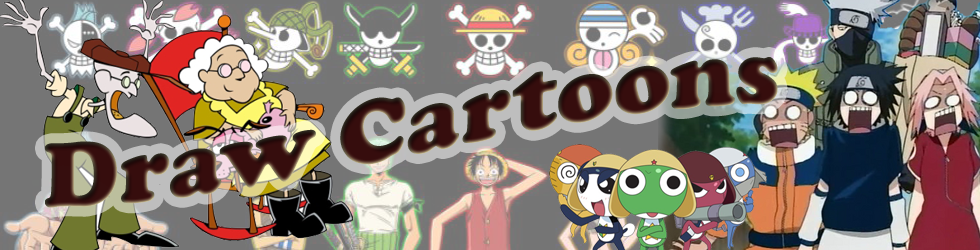
<style>
.page{position:relative;width:980px;height:250px}
.page>*{position:absolute;margin:0}
.t1{font:95px "CooperBlack"}
</style>
<div class="page">
<p class="t1" style="left:45px;top:57px;width:733px;height:151px">Draw Cartoons</p>
</div>
